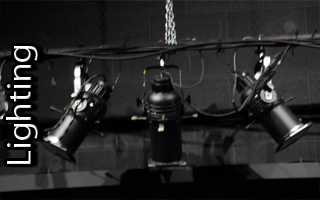
<style>
.page{position:relative;width:320px;height:200px}
.page>*{position:absolute;margin:0}
.t1{font:35.2px "MyriadPro-Regular";color:#ffffff}
</style>
<div class="page">
<p class="t1" style="left:6px;top:45px;width:32px;height:119px;rotate:-90deg">Lighting</p>
</div>
